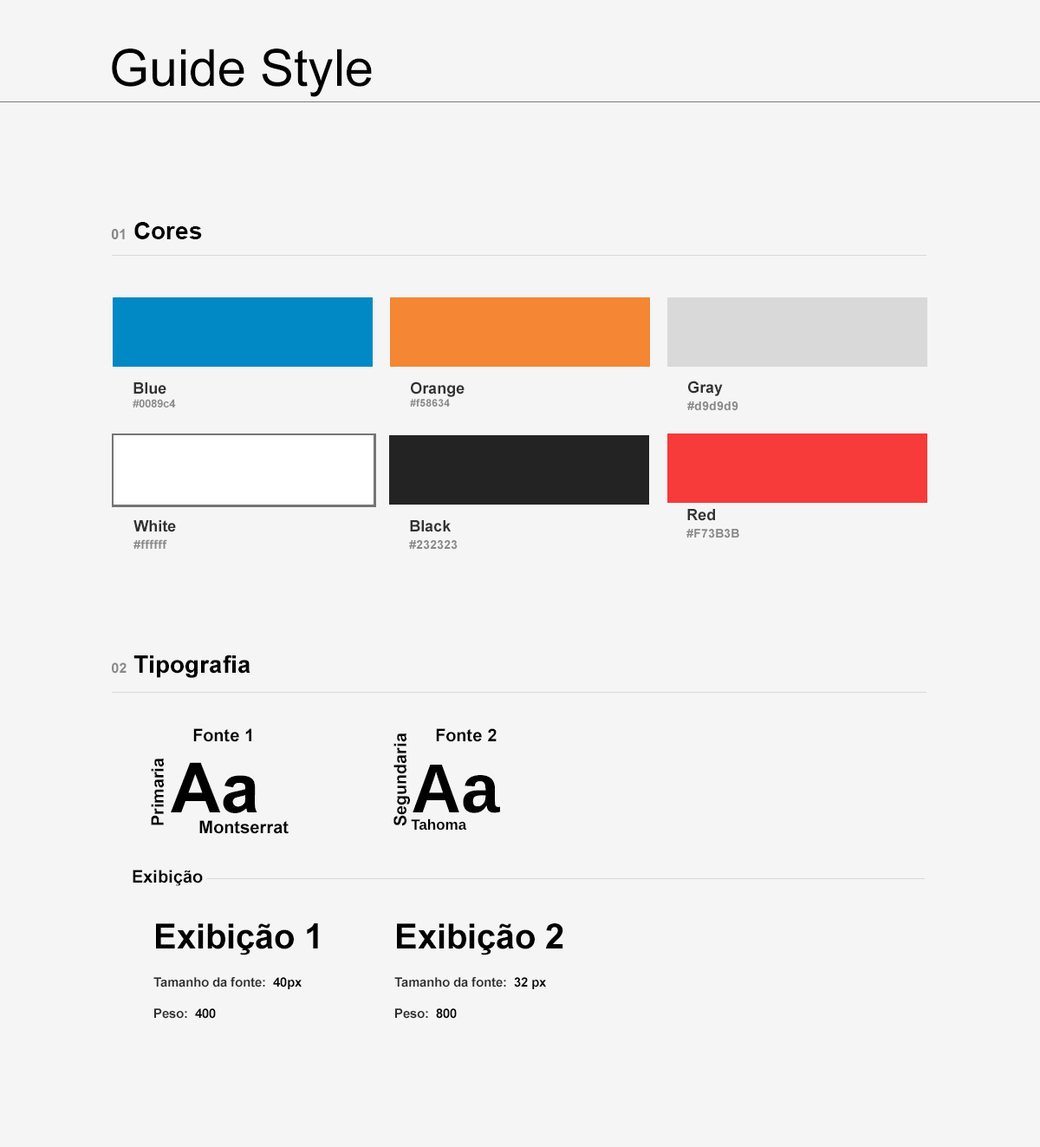
<style>
.page{position:relative;width:1040px;height:1147px;background:#f5f5f5}
.page>*{position:absolute;margin:0}
.t1{font:51.1px "ArialMT";color:#000000}
.t2{font:24.3px "Arial-BoldMT";color:#000000}
.t3{font:13.9px "Arial-BoldMT";color:#888888}
.t4{font:11.3px "Arial-BoldMT";color:#888888}
.t5{font:15.6px "Arial-BoldMT";color:#313131}
.t6{font:10.4px "Arial-BoldMT";color:#888888}
.t7{font:12.1px/17.3px "Arial-BoldMT";color:#888888}
.t8{font:17.3px "Arial-BoldMT";color:#000000}
.t9{font:69.3px "Arial-BoldMT";color:#000000}
.t10{font:14.7px "Arial-BoldMT";color:#000000}
.t11{font:34.7px "Arial-BoldMT";color:#000000}
.t12{font:13px "Arial-BoldMT";color:#2d2d2d}
.t13{font:13px "Arial-BoldMT";color:#000000}
</style>
<div class="page">
<p class="t1" style="left:112px;top:49px;width:260px;height:48px">Guide Style</p>
<p class="t2" style="left:111px;top:222px;width:91px;height:17px"><span class="t3">01 </span>Cores</p>
<p class="t4" style="left:133px;top:382px;width:43px;height:25px"><span class="t5">Blue<br></span>#0089c4</p>
<p class="t6" style="left:410px;top:381px;width:55px;height:25px"><span class="t5">Orange<br></span>#f58634</p>
<p class="t7" style="left:687px;top:380px;width:51px;height:31px"><span class="t5">Gray<br></span>#d9d9d9</p>
<p class="t7" style="left:686px;top:509px;width:53px;height:29px"><span class="t5">Red<br></span>#F73B3B</p>
<p class="t7" style="left:133px;top:520px;width:43px;height:29px"><span class="t5">White<br></span>#ffffff</p>
<p class="t7" style="left:409px;top:520px;width:49px;height:29px"><span class="t5">Black<br></span>#232323</p>
<p class="t2" style="left:112px;top:654px;width:138px;height:24px"><span class="t3">02 </span>Tipografia</p>
<p class="t8" style="left:193px;top:728px;width:58px;height:14px">Fonte 1</p>
<p class="t8" style="left:393px;top:732px;width:17px;height:94px;rotate:-90deg">Segundaria</p>
<p class="t8" style="left:436px;top:728px;width:61px;height:14px">Fonte 2</p>
<p class="t8" style="left:151px;top:757px;width:13px;height:68px;rotate:-90deg">Primaria</p>
<p class="t8" style="left:171px;top:762px;width:118px;height:72px"><span class="t9">Aa<br>      </span>Montserrat</p>
<p class="t10" style="left:411px;top:764px;width:90px;height:66px"><span class="t9">Aa<br></span>Tahoma</p>
<p class="t8" style="left:133px;top:869px;width:70px;height:17px">Exibição</p>
<p class="t11" style="left:156px;top:923px;width:162px;height:32px">Exibição 1</p>
<p class="t11" style="left:397px;top:923px;width:166px;height:32px">Exibição 2</p>
<p class="t12" style="left:153px;top:977px;width:149px;height:41px">Tamanho da fonte:  <span class="t13">40px<br></span><br>Peso:<span class="t13">  400</span></p>
<p class="t12" style="left:394px;top:977px;width:152px;height:41px">Tamanho da fonte:  <span class="t13">32 px<br></span><br>Peso:<span class="t13">  800</span></p>
</div>
